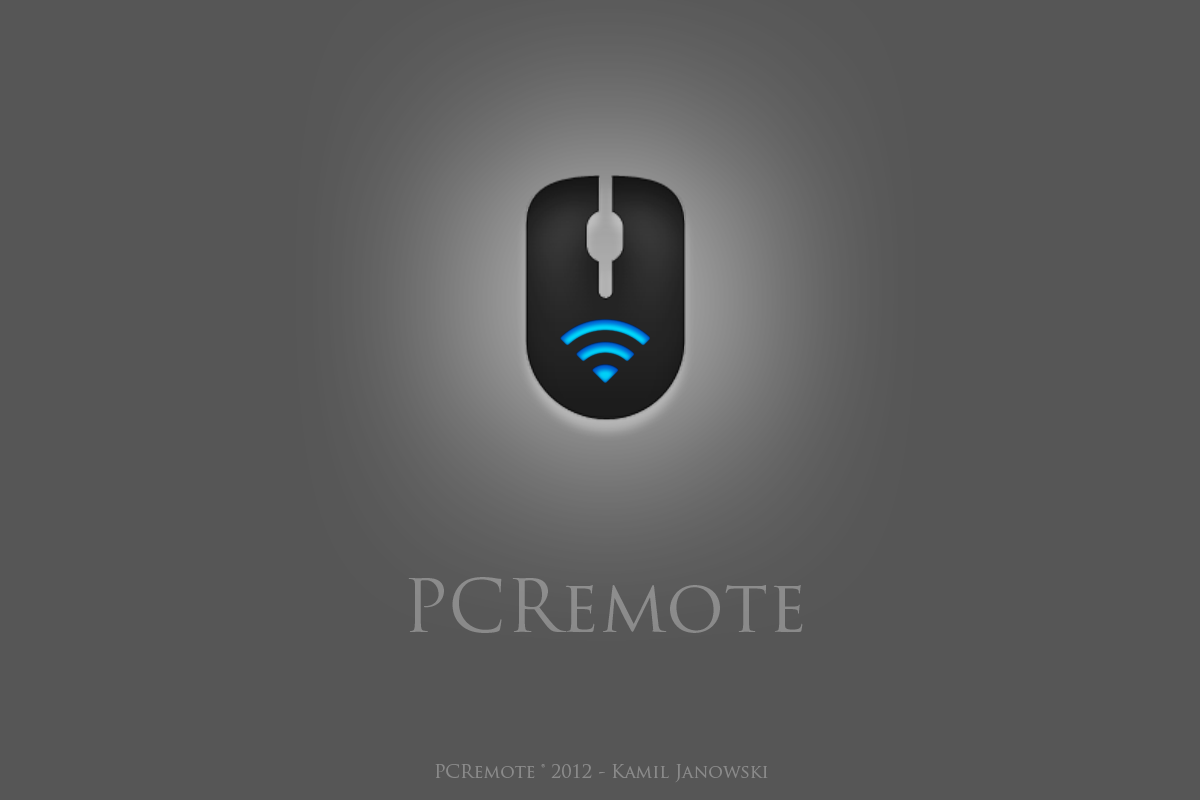
<style>
.page{position:relative;width:1200px;height:800px;background:#565656}
.page>*{position:absolute;margin:0}
.t1{font:72px "TrajanPro-Regular";color:#8a8a8a}
.t2{font:18px "TrajanPro-Regular";color:#8a8a8a}
</style>
<div class="page">
<p class="t1" style="left:408px;top:577px;width:395px;height:56px">PCRemote</p>
<p class="t2" style="left:435px;top:764px;width:333px;height:19px">PCRemote ® 2012 - Kamil Janowski</p>
</div>
